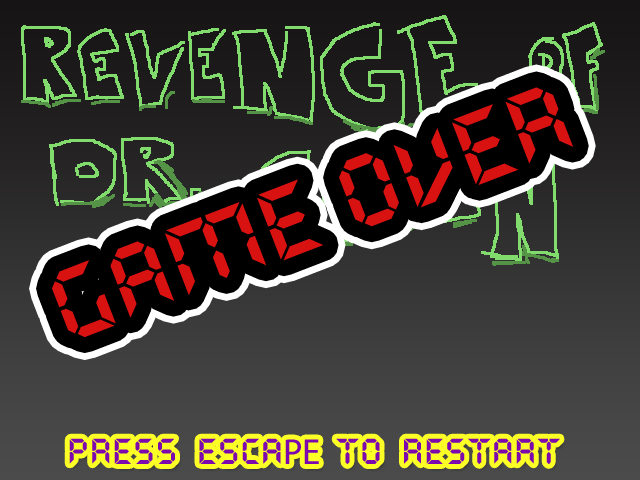
<style>
.page{position:relative;width:640px;height:480px}
.page>*{position:absolute;margin:0}
.t1{font:100px "QuartzMS";color:#d81111}
.t2{font:36px "QuartzMS";color:#7d08ae}
.t3{font:36px "MyriadPro-Regular";color:#7d08ae}
</style>
<div class="page">
<p class="t1" style="left:52px;top:87px;width:521px;height:250px;rotate:-21deg">GAME OVER</p>
<p class="t1" style="left:52px;top:87px;width:521px;height:250px;rotate:-21deg">GAME OVER</p>
<p class="t2" style="left:69px;top:438px;width:491px;height:26px">press  ESCA<span class="t3">PE  </span>to  REstart</p>
</div>
